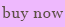
<style>
.page{position:relative;width:65px;height:27px;background:#eeb9fd}
.page>*{position:absolute;margin:0}
.t1{font:15px "Georgia";letter-spacing:0.05em;color:#5d5143}
</style>
<div class="page">
<p class="t1" style="left:2px;top:6px;width:62px;height:15px">buy now</p>
</div>
